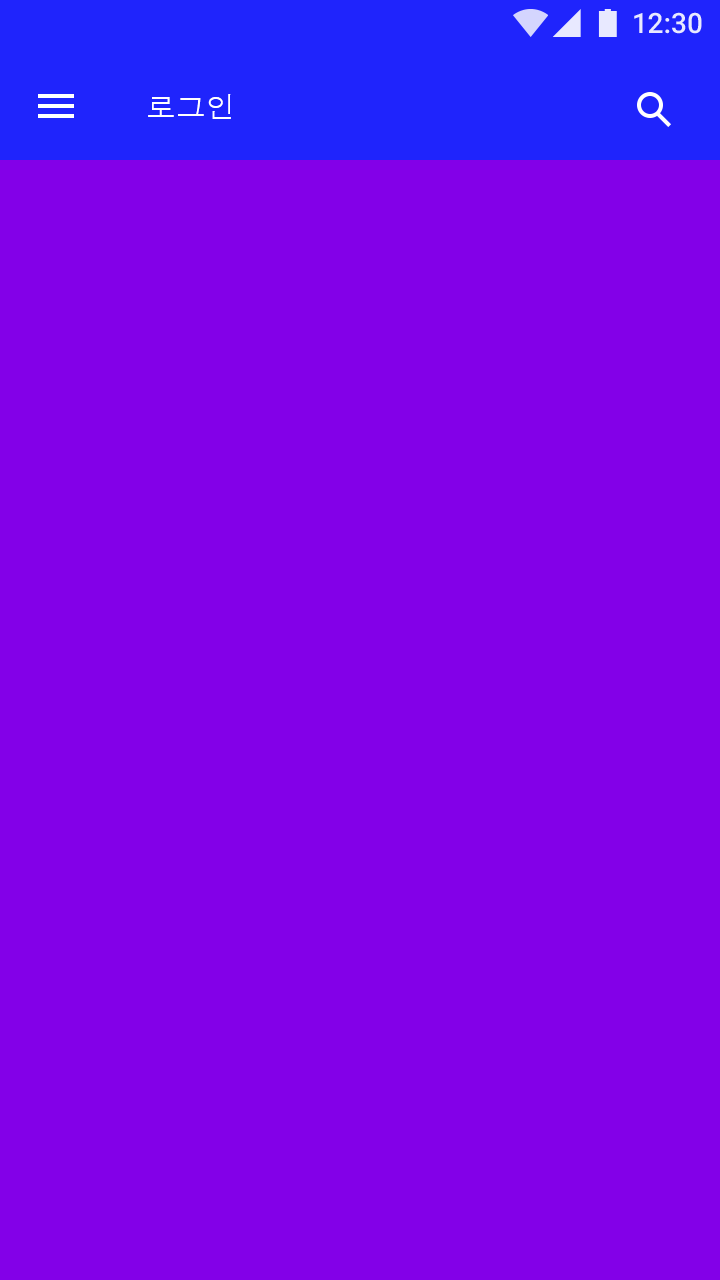
<style>
.page{position:relative;width:720px;height:1280px;background:#8300e8}
.page>*{position:absolute;margin:0}
.t1{font:30px "Dotum";color:#ffffff}
</style>
<div class="page">
<p class="t1" style="left:148px;top:94px;width:83px;height:25px">로그인</p>
</div>
